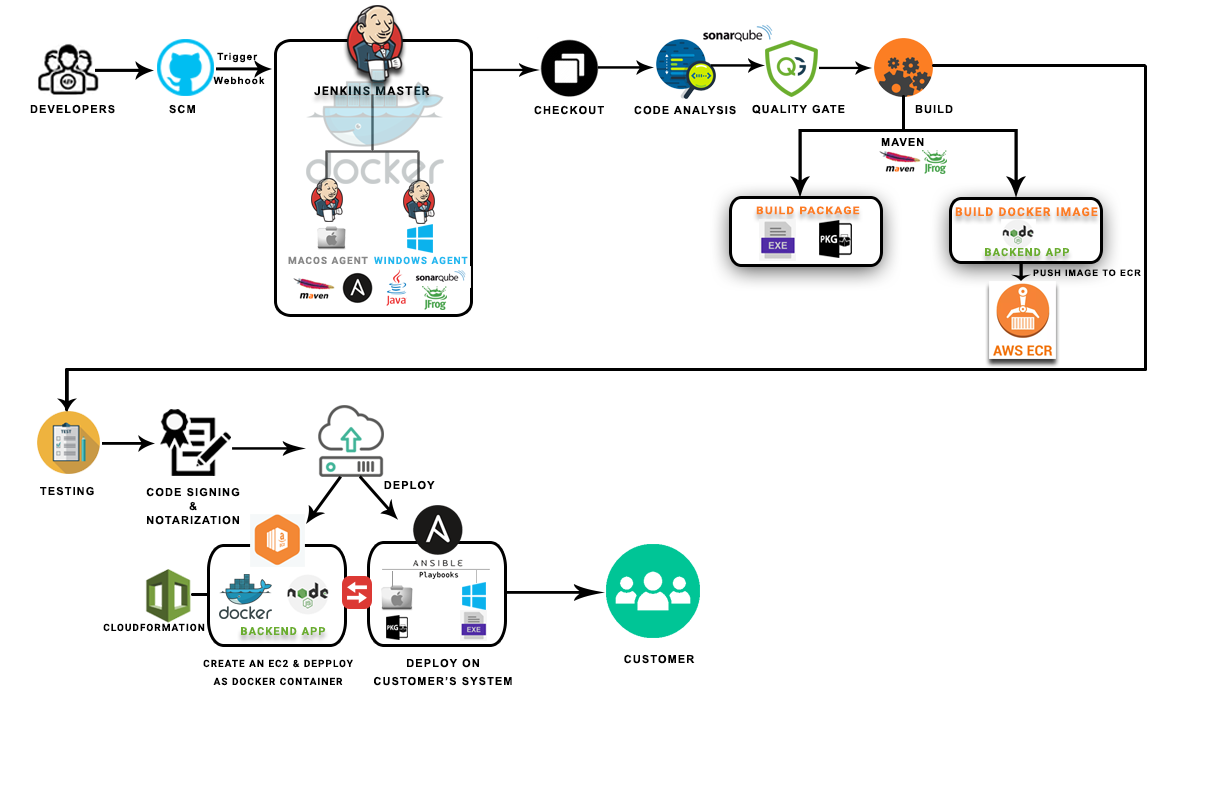
<style>
.page{position:relative;width:1206px;height:791px;background:#ffffff}
.page>*{position:absolute;margin:0}
.t1{font:10px/24px "Arial-BoldMT";letter-spacing:0.1em;color:#000000}
.t2{font:12px "Roboto-Bold";letter-spacing:0.1em;color:#000000}
.t3{font:11px "Arial-BoldMT";letter-spacing:0.1em;color:#010101}
.t4{font:11px "Arial-BoldMT";letter-spacing:0.1em;color:#000000}
.t5{font:10.7px "Roboto-Bold";letter-spacing:0.1em;color:#fc7e23;scale:1.12 1}
.t6{font:12px "Roboto-Bold";letter-spacing:0.1em;color:#fc7e23}
.t7{font:10px "Roboto-Bold";letter-spacing:0.1em;color:#888888}
.t8{font:10px "Roboto-Bold";letter-spacing:0.1em;color:#22b9ef}
.t9{font:11px "Roboto-Bold";letter-spacing:0.1em;color:#6bae2e}
.t10{font:9px "Arial-BoldMT";letter-spacing:0.1em;color:#000000}
.t11{font:11px/14px "Arial-BoldMT";letter-spacing:0.1em;color:#000000}
.t12{font:10px "Roboto-Bold";letter-spacing:0.1em;color:#000000}
.t13{font:10px/18px "Roboto-Bold";letter-spacing:0.1em;color:#000000}
.t14{font:11px/18px "Arial-BoldMT";letter-spacing:0.1em;color:#000000}
</style>
<div class="page">
<p class="t1" style="left:213px;top:52px;width:52px;height:33px;text-align:center">Trigger <br>Webhook</p>
<p class="t2" style="left:314px;top:86px;width:116px;height:10px">JENKINS MASTER</p>
<p class="t3" style="left:30px;top:104px;width:85px;height:10px">DEVELOPERS</p>
<p class="t4" style="left:169px;top:104px;width:26px;height:10px">SCM</p>
<p class="t4" style="left:534px;top:105px;width:70px;height:10px">CHECKOUT</p>
<p class="t4" style="left:634px;top:105px;width:102px;height:10px">CODE ANALYSIS</p>
<p class="t4" style="left:752px;top:104px;width:93px;height:10px">QUALITY GATE</p>
<p class="t4" style="left:915px;top:105px;width:38px;height:9px">BUILD</p>
<p class="t4" style="left:881px;top:138px;width:43px;height:8px">MAVEN</p>
<p class="t5" style="left:756px;top:206px;width:104px;height:9px">BUILD PACKAGE</p>
<p class="t6" style="left:955px;top:207px;width:143px;height:10px">BUILD DOCKER IMAGE</p>
<p class="t7" style="left:288px;top:256px;width:80px;height:9px">MACOS AGENT</p>
<p class="t8" style="left:374px;top:256px;width:94px;height:9px">WINDOWS AGENT</p>
<p class="t9" style="left:985px;top:248px;width:85px;height:9px">BACKEND APP</p>
<p class="t10" style="left:1033px;top:269px;width:108px;height:8px">PUSH IMAGE TO ECR</p>
<p class="t4" style="left:40px;top:486px;width:54px;height:10px">TESTING</p>
<p class="t4" style="left:384px;top:480px;width:51px;height:10px">DEPLOY</p>
<p class="t11" style="left:146px;top:487px;width:94px;height:38px;text-align:center">CODE SIGNING<br>&amp;<br>NOTARIZATION</p>
<p class="t12" style="left:103px;top:623px;width:102px;height:9px">CLOUDFORMATION</p>
<p class="t9" style="left:241px;top:627px;width:85px;height:9px">BACKEND APP</p>
<p class="t4" style="left:624px;top:654px;width:71px;height:10px">CUSTOMER</p>
<p class="t13" style="left:203px;top:659px;width:150px;height:27px;text-align:center">CREATE AN EC2 &amp; DEPPLOY<br>AS DOCKER CONTAINER</p>
<p class="t14" style="left:374px;top:658px;width:138px;height:28px;text-align:center">DEPLOY ON<br>CUSTOMER’S SYSTEM</p>
</div>
